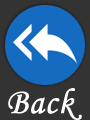
<style>
.page{position:relative;width:90px;height:120px;background:#333333}
.page>*{position:absolute;margin:0}
.t1{font:36px "MonotypeCorsiva";color:#ffffff;font-weight:bold}
</style>
<div class="page">
<p class="t1" style="left:8px;top:88px;width:74px;height:32px">Back</p>
</div>
